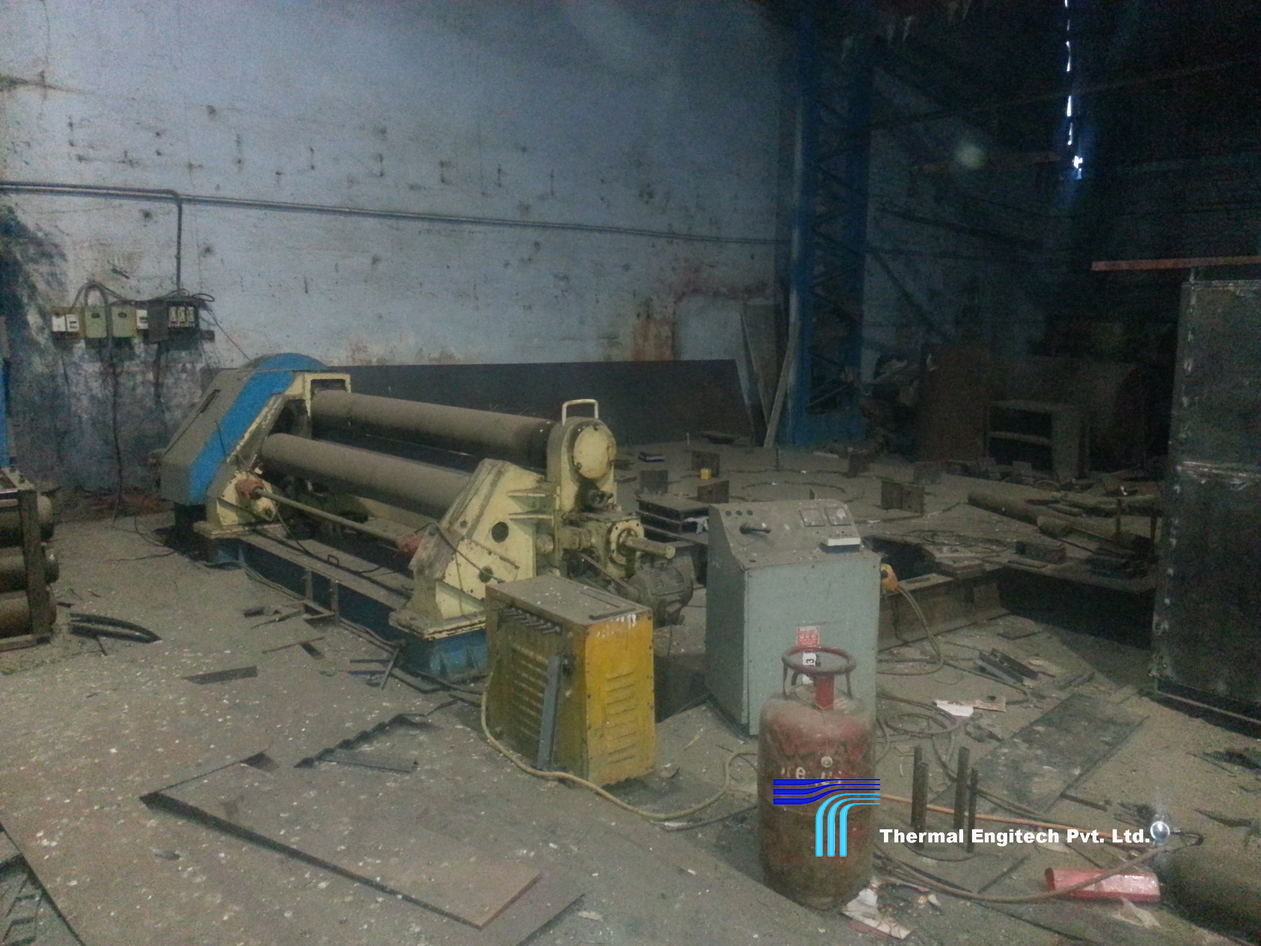
<style>
.page{position:relative;width:1261px;height:946px}
.page>*{position:absolute;margin:0}
.t1{font:18.5px "Arial-Black";color:#faf8f8}
</style>
<div class="page">
<p class="t1" style="left:880px;top:829px;width:269px;height:17px">Thermal Engitech Pvt. Ltd.</p>
</div>
